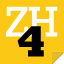
<style>
.page{position:relative;width:64px;height:64px;background:#fcc816}
.page>*{position:absolute;margin:0}
.t1{font:43.2px "Rockwell";letter-spacing:-0.04em;color:#ffffff}
.t2{font:43.2px "Rockwell-ExtraBold";letter-spacing:-0.04em;color:#010101}
</style>
<div class="page">
<p class="t1" style="left:6px;top:6px;width:52px;height:31px">ZH</p>
<p class="t2" style="left:17px;top:26px;width:27px;height:31px">4</p>
</div>
